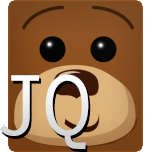
<style>
.page{position:relative;width:152px;height:152px}
.page>*{position:absolute;margin:0}
.t1{font:96px "Inconsolata-Regular";color:#e9e9e9}
</style>
<div class="page">
<p class="t1" style="left:0px;top:74px;width:89px;height:75px">JQ</p>
</div>
